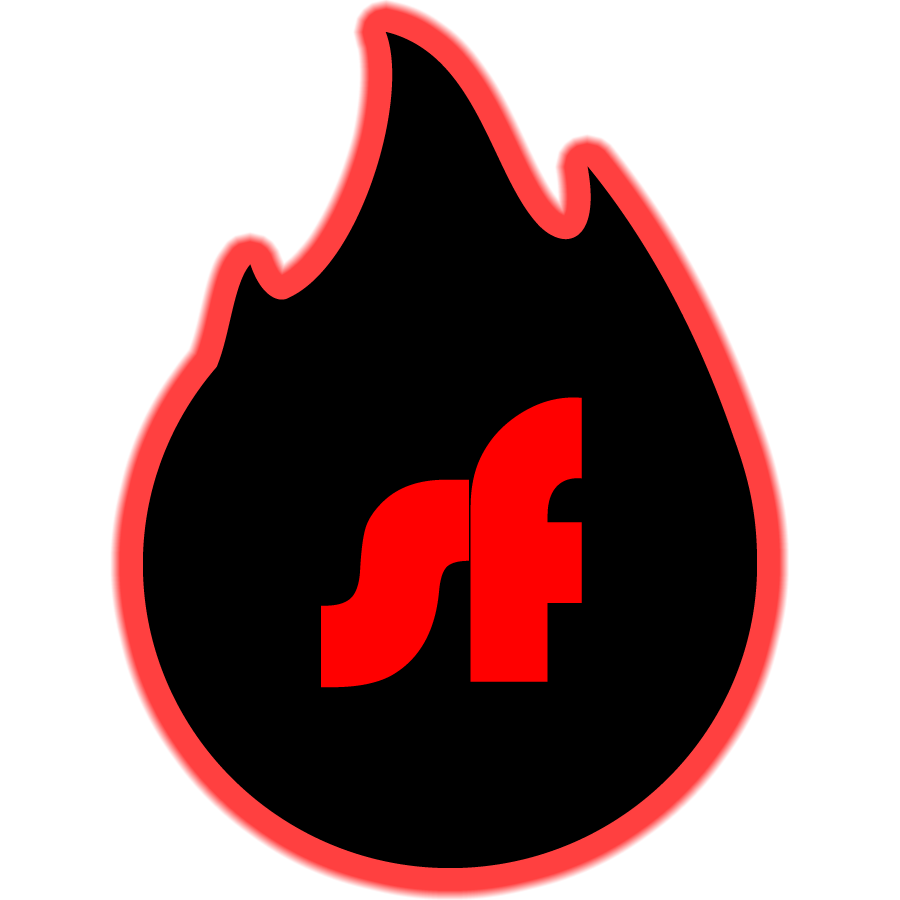
<style>
.page{position:relative;width:900px;height:900px;background:#ffffff}
.page>*{position:absolute;margin:0}
.t1{font:420.4px "Bauhaus93";letter-spacing:-0.055em;color:#ff0000}
</style>
<div class="page">
<p class="t1" style="left:321px;top:397px;width:261px;height:291px">sf</p>
</div>
